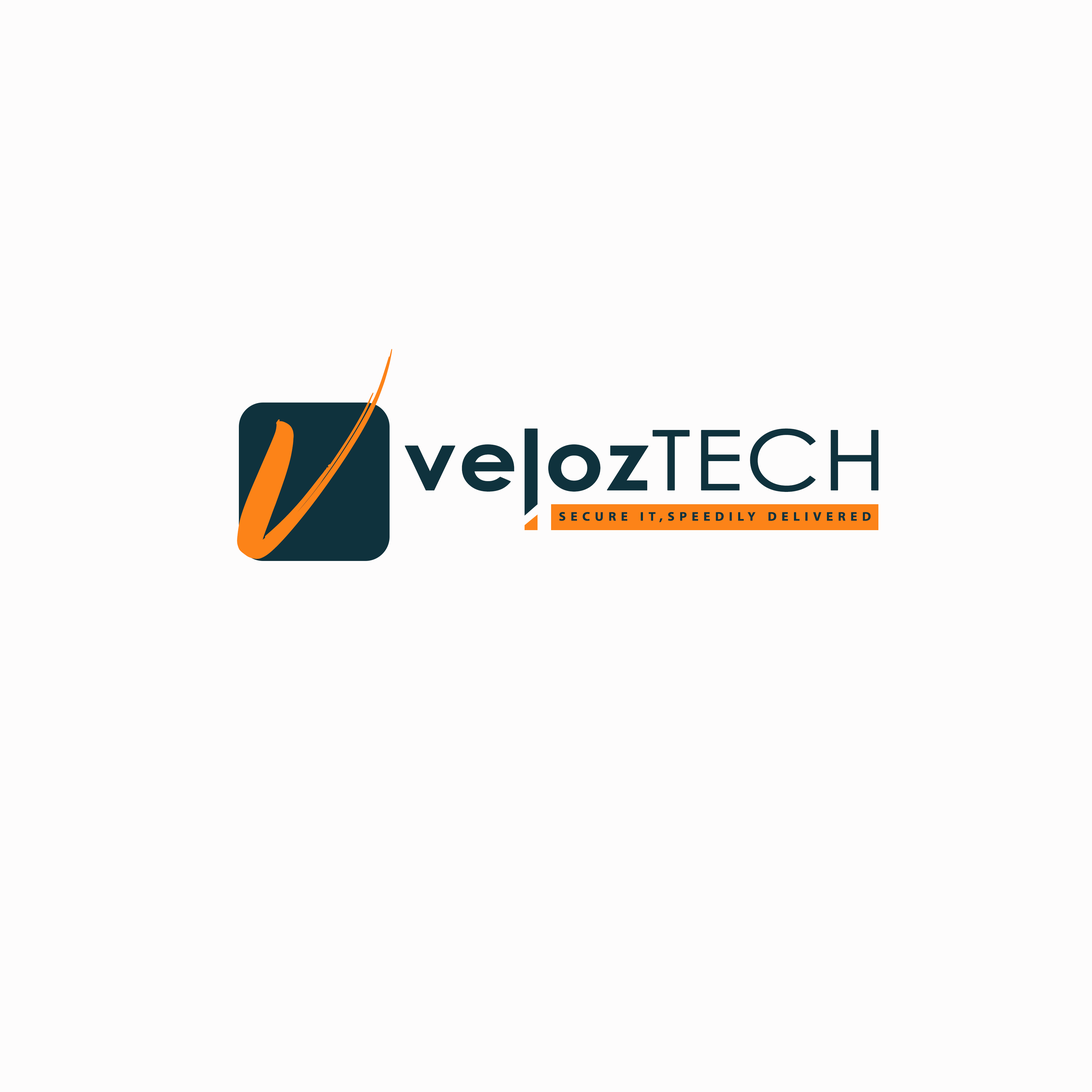
<style>
.page{position:relative;width:1092px;height:1092px;background:#fdfcfc}
.page>*{position:absolute;margin:0}
.t1{font:178.9px "Instink";color:#fc8318;font-weight:bold;font-style:italic;scale:1.1 1}
.t2{font:83.2px "CenturyGothic-Bold";color:#0f323d;font-weight:bold;scale:1.11 1}
.t3{font:83.2px "CenturyGothic";color:#0f323d;font-weight:bold;scale:1.11 1}
.t4{font:12.5px "MyriadPro-Bold";letter-spacing:0.35em;color:#0f323d;font-weight:bold;scale:1.03 1}
</style>
<div class="page">
<p class="t1" style="left:237px;top:349px;width:155px;height:210px">V</p>
<p class="t2" style="left:405px;top:428px;width:474px;height:64px">veloz<span class="t3">TECH</span></p>
<p class="t4" style="left:559px;top:512px;width:312px;height:10px">SECURE IT,SPEEDILY DELIVERED</p>
</div>
